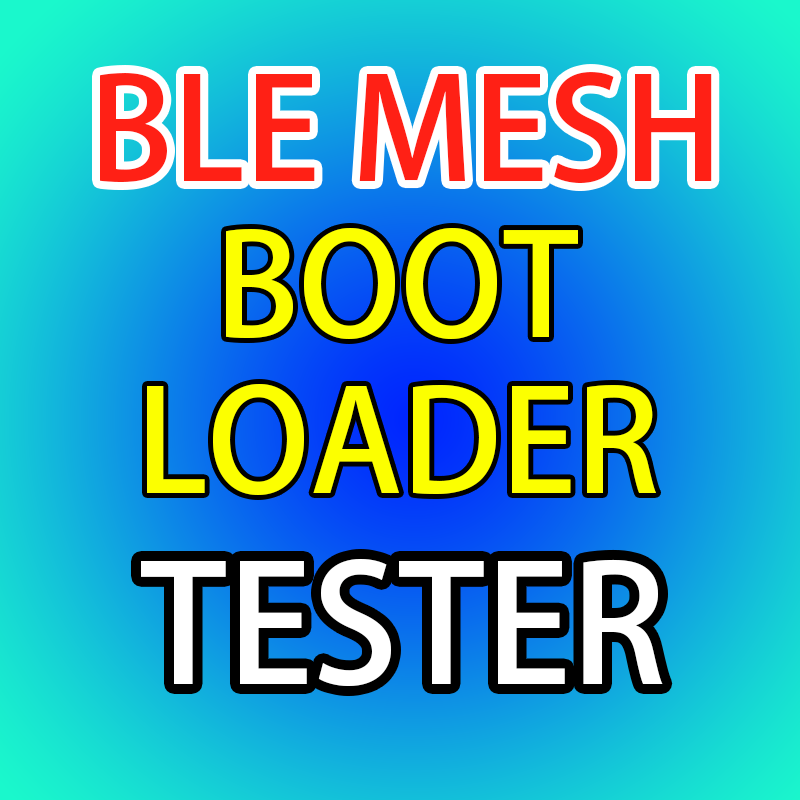
<style>
.page{position:relative;width:800px;height:800px}
.page>*{position:absolute;margin:0}
.t1{font:140px "AdobeHeitiStd-Regular";color:#ff2015}
.t2{font:140px "AdobeHeitiStd-Regular";color:#fcff00}
.t3{font:160px "AdobeHeitiStd-Regular";color:#ffffff}
</style>
<div class="page">
<p class="t1" style="left:100px;top:72px;width:612px;height:111px">BLE MESH</p>
<p class="t2" style="left:226px;top:228px;width:352px;height:111px">BOOT</p>
<p class="t2" style="left:147px;top:384px;width:510px;height:111px">LOADER</p>
<p class="t3" style="left:141px;top:559px;width:522px;height:127px">TESTER</p>
</div>
